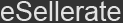
<style>
.page{position:relative;width:123px;height:23px;background:#333333}
.page>*{position:absolute;margin:0}
.t1{font:27px "ArialMT";color:#e2e2e2}
</style>
<div class="page">
<p class="t1" style="left:1px;top:1px;width:120px;height:20px">eSellerate</p>
</div>
